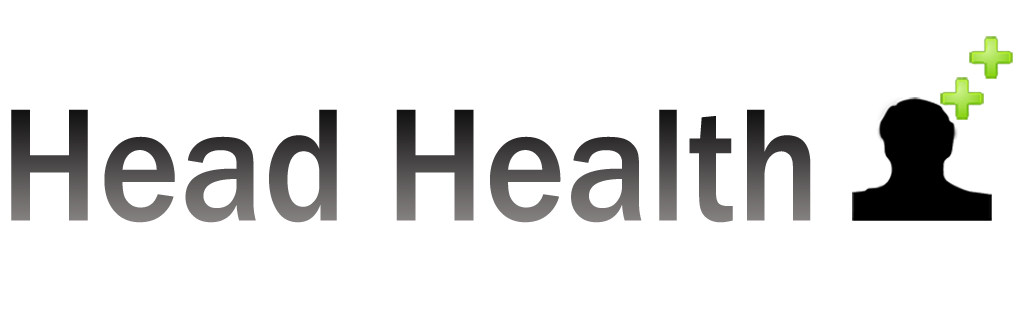
<style>
.page{position:relative;width:1024px;height:333px;background:#ffffff}
.page>*{position:absolute;margin:0}
.t1{font:165.7px "FranklinGothic-Medium";scale:0.93 1}
</style>
<div class="page">
<p class="t1" style="left:11px;top:109px;width:800px;height:114px">Head Health</p>
</div>
